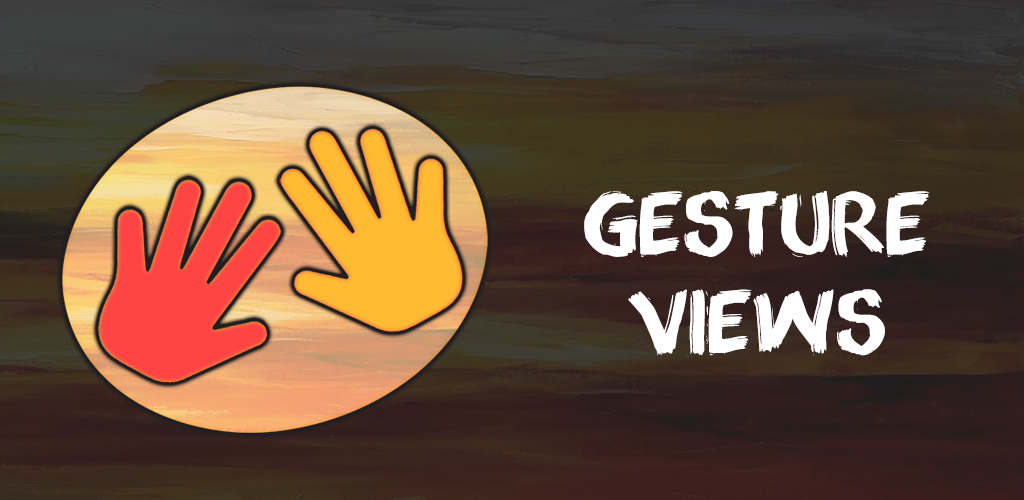
<style>
.page{position:relative;width:1024px;height:500px}
.page>*{position:absolute;margin:0}
.t1{font:81.9px "Appopaint";color:#ffffff}
</style>
<div class="page">
<p class="t1" style="left:584px;top:190px;width:346px;height:166px;text-align:center">GESTURE<br>VIEWS</p>
</div>
